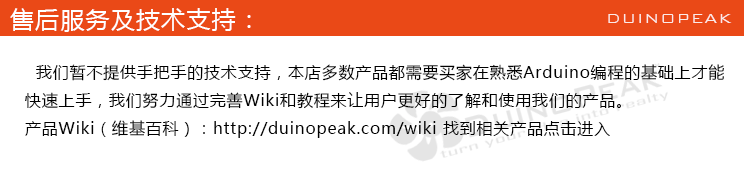
<style>
.page{position:relative;width:744px;height:174px;background:#ffffff}
.page>*{position:absolute;margin:0}
.t1{font:24px "MicrosoftYaHei";letter-spacing:0.05em;color:#ffffff}
.t2{font:18px "BankGothicBT-Light";letter-spacing:0.05em;color:#ffffff}
.t3{font:16px "MicrosoftYaHei";letter-spacing:0.05em;color:#000000}
</style>
<div class="page">
<p class="t1" style="left:10px;top:8px;width:241px;height:24px">售后服务及技术支持：</p>
<p class="t2" style="left:608px;top:14px;width:124px;height:9px;opacity:0.85">DUINOPEAK</p>
<p class="t3" style="left:25px;top:64px;width:699px;height:74px">我们暂不提供手把手的技术支持，本店多数产品都需要买家在熟悉Arduino编程的基础上才能<br>快速上手，我们努力通过完善Wiki和教程来让用户更好的了解和使用我们的产品。<br>产品Wiki（维基百科）：http://duinopeak.com/wiki 找到相关产品点击进入</p>
</div>
